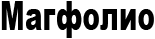
<style>
.page{position:relative;width:155px;height:39px;background:#ffffff}
.page>*{position:absolute;margin:0}
.t1{font:39.6px "Arial-Black";color:#000000;scale:0.66 1}
</style>
<div class="page">
<p class="t1" style="left:1px;top:1px;width:153px;height:37px">Магфолио</p>
</div>
